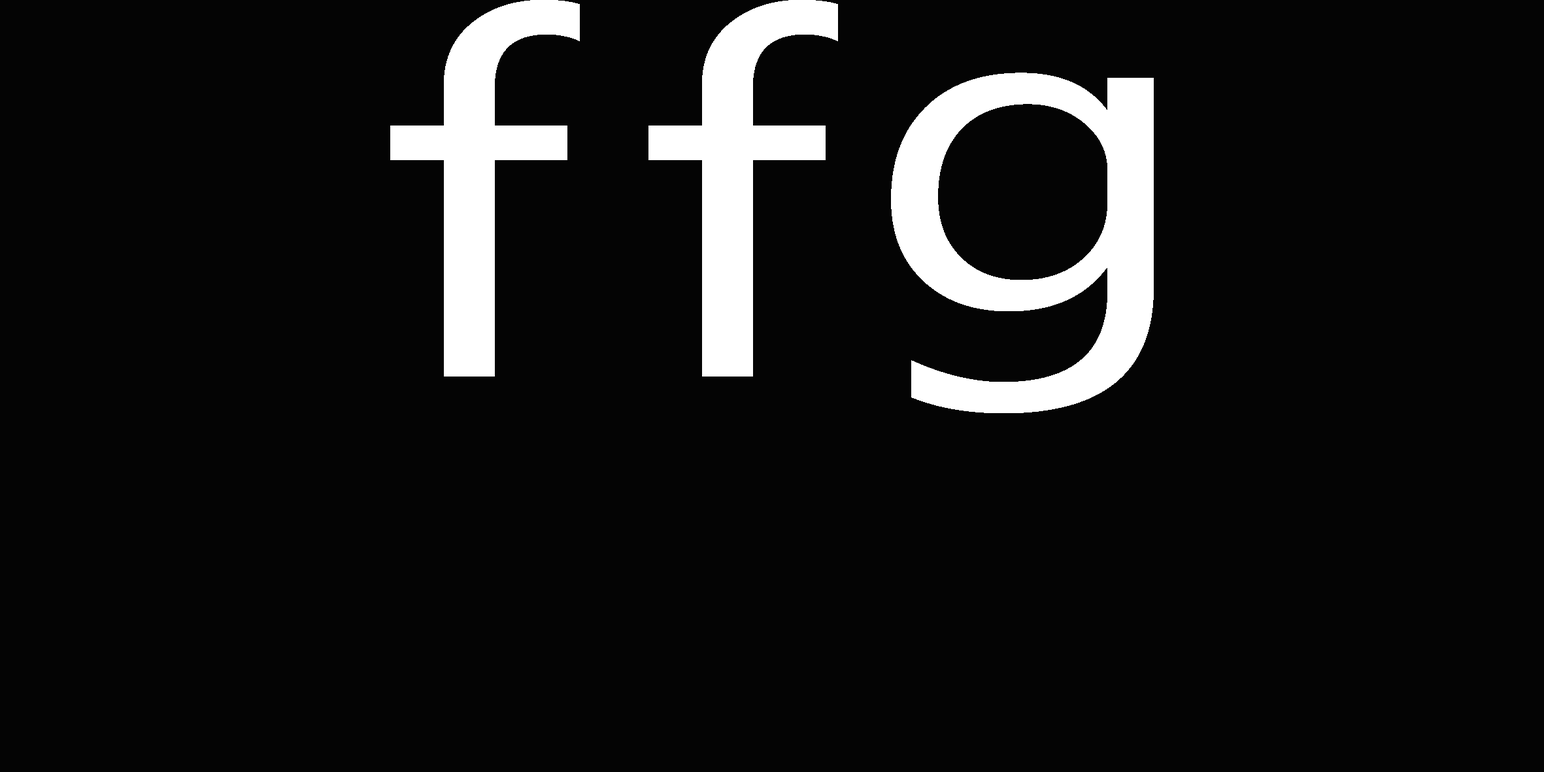
<style>
.page{position:relative;width:1544px;height:772px;background:#040404}
.page>*{position:absolute;margin:0}
.t1{font:500.6px "MyanmarText";letter-spacing:0.1em;color:#ffffff;scale:1.25 1}
.t2{font:455.1px "MyanmarText";letter-spacing:0.1em;color:#ffffff;scale:1.25 1}
</style>
<div class="page">
<p class="t1" style="left:390px;top:0px;width:448px;height:377px">ff</p>
<p class="t2" style="left:891px;top:73px;width:263px;height:340px">g</p>
</div>
